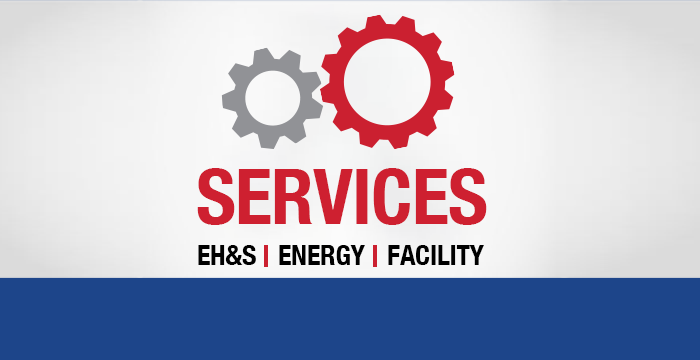
<style>
.page{position:relative;width:700px;height:360px;background:#1d458a}
.page>*{position:absolute;margin:0}
.t1{font:76.6px "HelveticaNeueLTCom-BdCn";letter-spacing:-0.01em;color:#ce2030}
.t2{font:27.9px "HelveticaNeueLTCom-BdCn";letter-spacing:-0.01em;color:#000000}
</style>
<div class="page">
<p class="t1" style="left:197px;top:168px;width:290px;height:57px">SERVICES</p>
<p class="t2" style="left:198px;top:245px;width:58px;height:20px">EH&amp;S</p>
<p class="t2" style="left:279px;top:245px;width:86px;height:20px">ENERGY</p>
<p class="t2" style="left:388px;top:245px;width:96px;height:20px">FACILITY</p>
</div>
